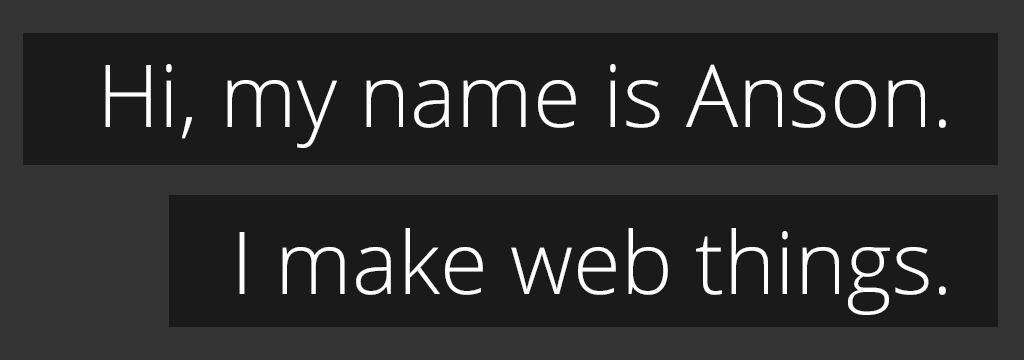
<style>
.page{position:relative;width:1024px;height:360px;background:#1a1a1a}
.page>*{position:absolute;margin:0}
.t1{font:87px/167px "OpenSans-Light";color:#ffffff}
</style>
<div class="page">
<p class="t1" style="left:105px;top:64px;width:841px;height:251px;text-align:right">Hi, my name is Anson.<br>I make web things.</p>
</div>
